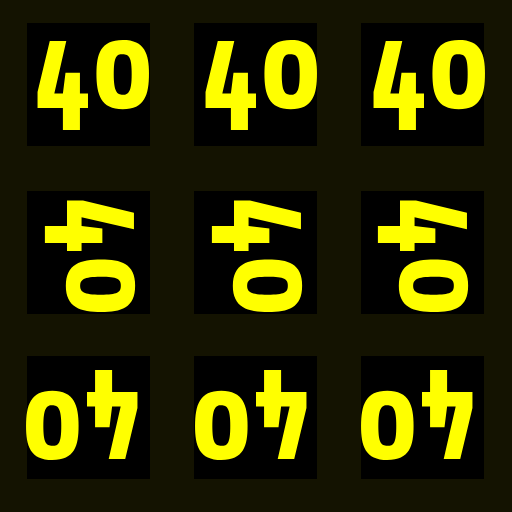
<style>
.page{position:relative;width:512px;height:512px;background:#141301}
.page>*{position:absolute;margin:0}
.t1{font:130px "Share-BoldOSF";color:#ffff00}
</style>
<div class="page">
<p class="t1" style="left:37px;top:39px;width:112px;height:92px">40</p>
<p class="t1" style="left:205px;top:39px;width:112px;height:92px">40</p>
<p class="t1" style="left:373px;top:39px;width:112px;height:92px">40</p>
<p class="t1" style="left:44px;top:200px;width:92px;height:112px;rotate:90deg">40</p>
<p class="t1" style="left:211px;top:200px;width:92px;height:112px;rotate:90deg">40</p>
<p class="t1" style="left:377px;top:200px;width:92px;height:112px;rotate:90deg">40</p>
<p class="t1" style="left:26px;top:369px;width:112px;height:92px;rotate:-180deg">40</p>
<p class="t1" style="left:195px;top:369px;width:112px;height:92px;rotate:-180deg">40</p>
<p class="t1" style="left:361px;top:369px;width:112px;height:92px;rotate:-180deg">40</p>
</div>
